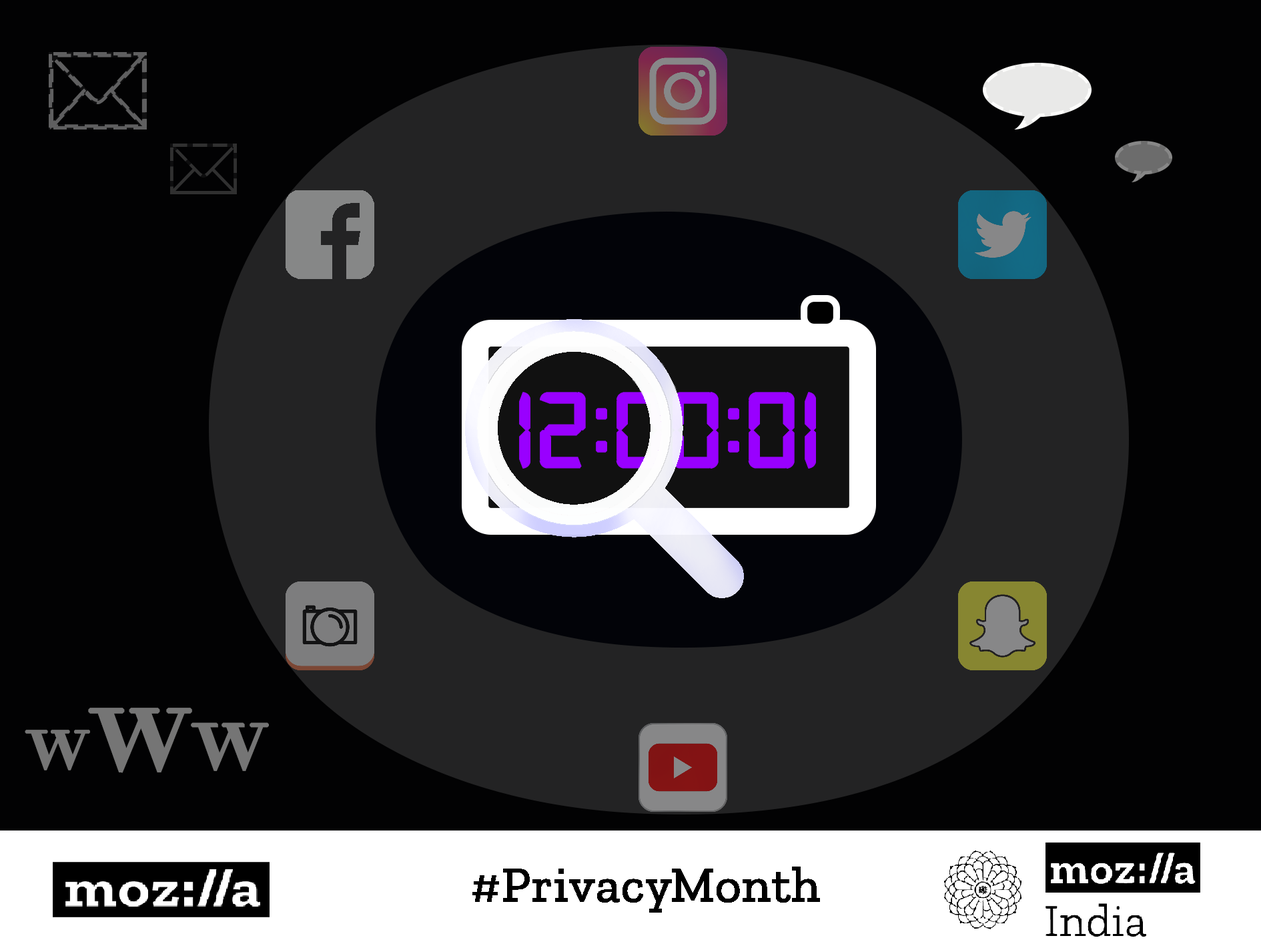
<style>
.page{position:relative;width:1261px;height:946px;background:#020203}
.page>*{position:absolute;margin:0}
.t1{font:111.2px "Digital-7";color:#9900ff;font-weight:bold}
.t2{font:83.4px "Didot";color:#757575;font-weight:bold}
.t3{font:133.5px "Didot";color:#757575;font-weight:bold}
.t4{font:100.1px "Didot";color:#757575;font-weight:bold}
.t5{font:50px "ZillaSlab-Regular";color:#000000;font-weight:bold}
</style>
<div class="page">
<p class="t1" style="left:519px;top:392px;width:297px;height:76px">12:00:01</p>
<p class="t2" style="left:25px;top:707px;width:244px;height:66px">w<span class="t3">w</span><span class="t4">w</span></p>
<p class="t5" style="left:472px;top:866px;width:348px;height:46px">#PrivacyMonth</p>
</div>
